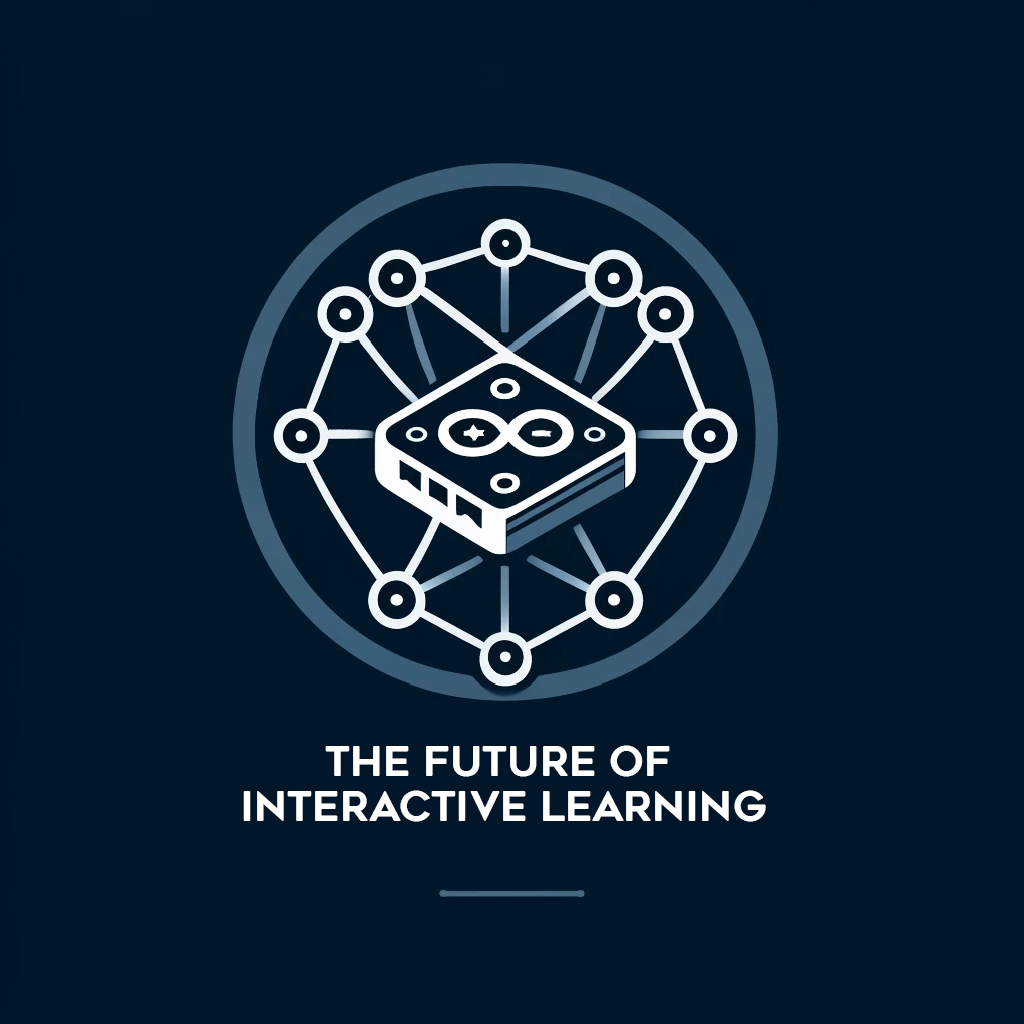
<style>
.page{position:relative;width:1024px;height:1024px;background:#011729}
.page>*{position:absolute;margin:0}
.t1{font:40px/15px "RenogareSoft-Regular";color:#ffffff}
</style>
<div class="page">
<p class="t1" style="left:243px;top:745px;width:523px;height:77px;text-align:center">THE FUTURE OF <br><br><br>INTERACTIVE LEARNING</p>
</div>
